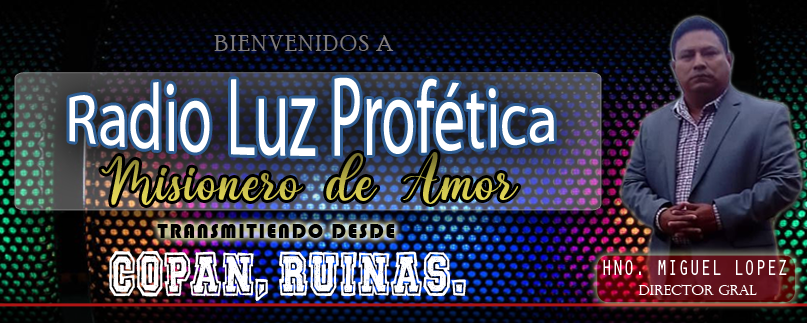
<style>
.page{position:relative;width:807px;height:323px}
.page>*{position:absolute;margin:0}
.t1{font:22.9px "PoorRichard-Regular";letter-spacing:0.1em;color:#837f7f;scale:0.96 1}
.t2{font:61.9px "MyriadPro-Regular";color:#ffffff}
.t3{font:74.3px "Valentime";color:#ccc14e}
.t4{font:20.5px "Bauhaus93";letter-spacing:0.075em;color:#000000}
.t5{font:24.9px "BacktoSchool";color:#ffffff;scale:0.88 1}
.t6{font:22.1px "OratorStd";color:#ffffff;scale:0.83 1}
.t7{font:14.4px "PerpetuaTitlingMT-Light";color:#ffffff}
</style>
<div class="page">
<p class="t1" style="left:214px;top:35px;width:180px;height:16px">BIENVENIDOS A</p>
<p class="t2" style="left:69px;top:77px;width:485px;height:79px">Radio Luz Profética</p>
<p class="t3" style="left:101px;top:152px;width:418px;height:53px">Misionero de Amor</p>
<p class="t4" style="left:157px;top:224px;width:238px;height:14px">TRANSMITIENDO DESDE</p>
<p class="t5" style="left:109px;top:250px;width:357px;height:51px;text-align:center">COPAN, RUINAS.</p>
<p class="t6" style="left:603px;top:260px;width:184px;height:15px">HNO. MIGUEL LOPEZ</p>
<p class="t7" style="left:638px;top:284px;width:119px;height:11px">director gral</p>
</div>
